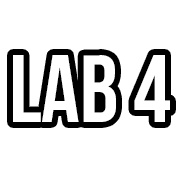
<style>
.page{position:relative;width:180px;height:180px;background:#ffffff}
.page>*{position:absolute;margin:0}
.t1{font:95px "BebasNeueBold";color:#ffffff}
</style>
<div class="page">
<p class="t1" style="left:13px;top:55px;width:157px;height:67px">lab 4</p>
</div>
